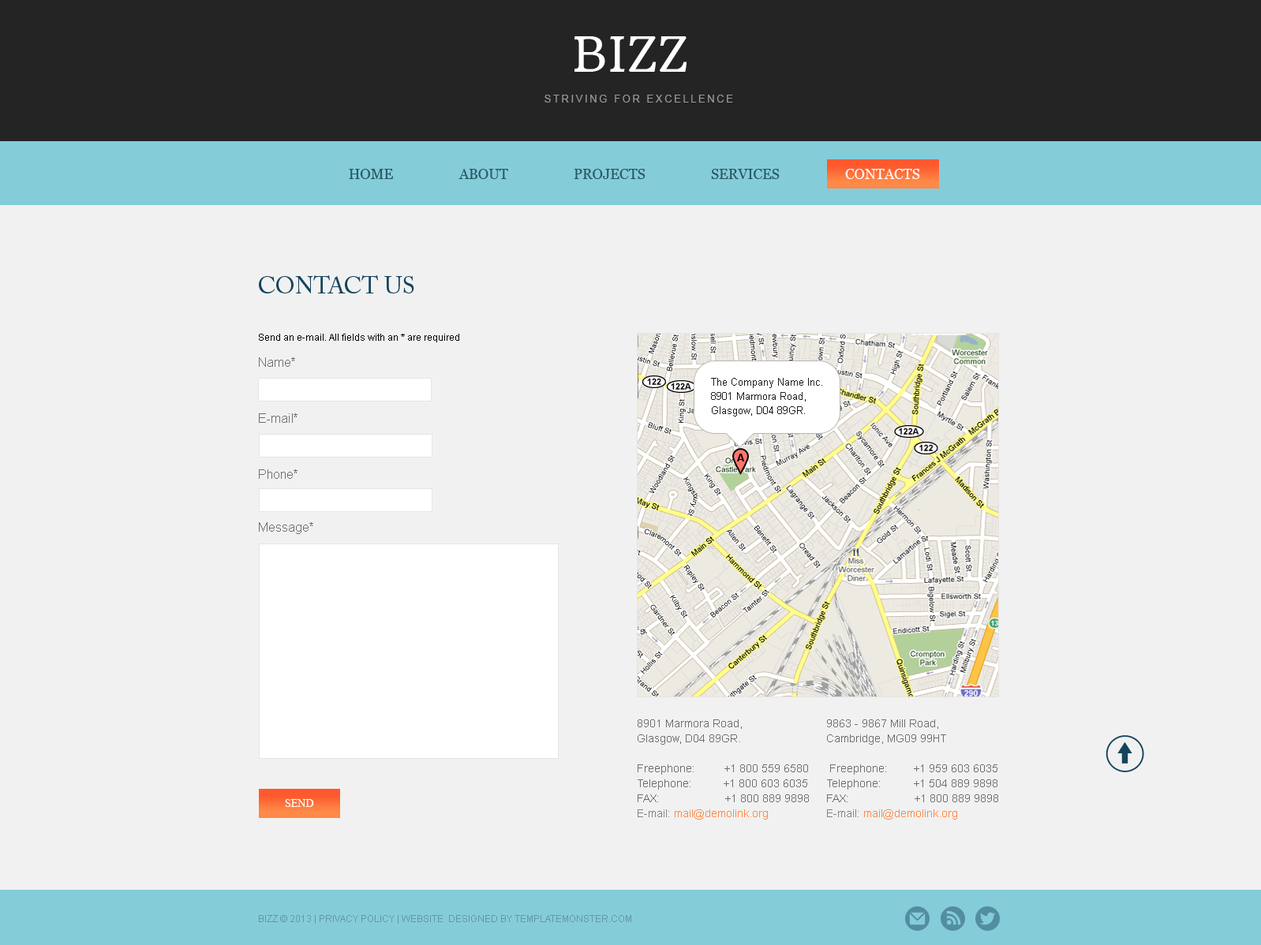
<style>
.page{position:relative;width:1261px;height:945px;background:#f1f1f1}
.page>*{position:absolute;margin:0}
.t1{font:46.6px "HeadlandOne-Regular";color:#ffffff}
.t2{font:10.3px "ArialMT";letter-spacing:0.2em;color:#989898;text-transform:uppercase}
.t3{font:14.2px "Georgia";color:#285962}
.t4{font:14.2px "Georgia";color:#ffffff}
.t5{font:23.7px "ACaslonPro-Regular";color:#16445c;text-transform:uppercase}
.t6{font:9.5px "ArialMT";color:#000000}
.t7{font:12.6px "ArialMT";color:#6f6f6f}
.t8{font:10.3px/14.2px "ArialMT";color:#1e1e1e}
.t9{font:10.3px "Arial-BoldMT";color:#000000}
.t10{font:11px/15px "ArialMT";color:#6f6f6f}
.t11{font:11px/15px "ArialMT";color:#848383}
.t12{font:11px/15px "ArialMT";color:#fe8948}
.t13{font:11px "TimesNewRomanPSMT";color:#ffffff;text-transform:uppercase}
.t14{font:9.5px "ArialMT";color:#6398a2;text-transform:uppercase}
.t15{font:9.5px "ArialMT";color:#6398a2}
</style>
<div class="page">
<p class="t1" style="left:575px;top:36px;width:112px;height:36px">BIZZ</p>
<p class="t2" style="left:545px;top:95px;width:188px;height:8px">striving for excellence</p>
<p class="t3" style="left:349px;top:169px;width:44px;height:10px">HOME</p>
<p class="t3" style="left:459px;top:169px;width:49px;height:10px">ABOUT</p>
<p class="t3" style="left:574px;top:169px;width:72px;height:10px">PROJECTS</p>
<p class="t3" style="left:711px;top:169px;width:69px;height:10px">SERVICES</p>
<p class="t4" style="left:845px;top:169px;width:75px;height:10px">CONTACTS</p>
<p class="t5" style="left:259px;top:275px;width:155px;height:19px">ConTact Us</p>
<p class="t6" style="left:259px;top:334px;width:200px;height:9px">Send an e-mail. All fields with an * are required</p>
<p class="t7" style="left:259px;top:358px;width:36px;height:9px">Name*</p>
<p class="t8" style="left:711px;top:378px;width:111px;height:39px">The Company Name Inc.<br>8901 Marmora Road,<br>Glasgow, D04 89GR.</p>
<p class="t7" style="left:259px;top:414px;width:39px;height:9px">E-mail*</p>
<p class="t9" style="left:737px;top:454px;width:8px;height:8px">A</p>
<p class="t7" style="left:259px;top:470px;width:39px;height:9px">Phone*</p>
<p class="t7" style="left:259px;top:522px;width:54px;height:12px">Message*</p>
<p class="t10" style="left:638px;top:720px;width:171px;height:100px">8901 Marmora Road,<br>Glasgow, D04 89GR.<br><br>Freephone:         +1 800 559 6580<br>Telephone:          +1 800 603 6035<br>FAX:                     +1 800 889 9898<span class="t11"> <br>E-mail: </span><span class="t12">mail@demolink.org</span></p>
<p class="t10" style="left:827px;top:720px;width:171px;height:100px">9863 - 9867 Mill Road, <br>Cambridge, MG09 99HT<br><br> Freephone:        +1 959 603 6035 Telephone:          +1 504 889 9898 FAX:                     +1 800 889 9898 <br><span class="t11">E-mail: </span><span class="t12">mail@demolink.org</span></p>
<p class="t13" style="left:285px;top:799px;width:29px;height:8px">Send</p>
<p class="t14" style="left:259px;top:915px;width:372px;height:9px">BiZZ © 2013 | Privacy Policy <span class="t15">| </span>Website  designed by TemplateMonster.com</p>
</div>
